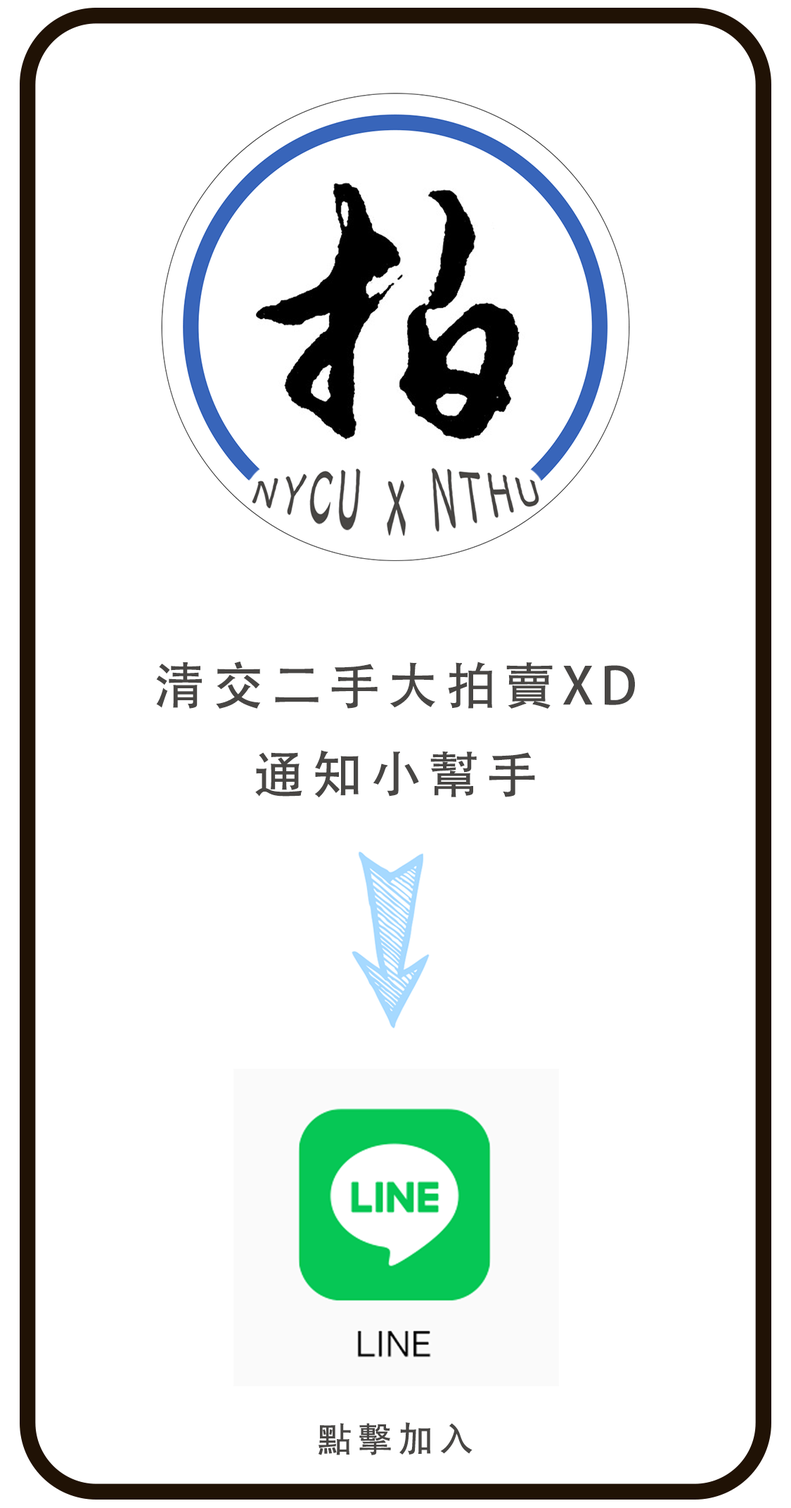
<style>
.page{position:relative;width:791px;height:1508px;background:#ffffff}
.page>*{position:absolute;margin:0}
.t1{font:50.6px "AdobeHeitiStd-Regular";letter-spacing:0.14em;color:#484644;text-transform:uppercase}
.t2{font:35.1px "AdobeHeitiStd-Regular";letter-spacing:0.14em;color:#484644;text-transform:uppercase}
</style>
<div class="page">
<p class="t1" style="left:156px;top:661px;width:479px;height:137px;text-align:center">清交二手大拍賣XD<br>通知小幫手</p>
<p class="t2" style="left:318px;top:1422px;width:154px;height:33px">點擊加入</p>
</div>
